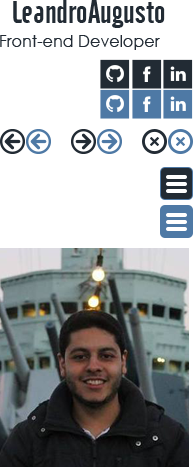
<style>
.page{position:relative;width:193px;height:467px;background:#ffffff}
.page>*{position:absolute;margin:0}
.t1{font:32px "Cafeta";color:#222b34}
.t2{font:16px "CenturyGothic";color:#222b34}
</style>
<div class="page">
<p class="t1" style="left:13px;top:0px;width:152px;height:28px">LeandroAugusto</p>
<p class="t2" style="left:0px;top:35px;width:160px;height:15px">Front-end Developer</p>
</div>
